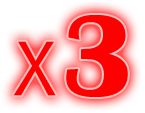
<style>
.page{position:relative;width:145px;height:113px;background:#ffffff}
.page>*{position:absolute;margin:0}
.t1{font:100px "HGGothicM";color:#fe0000}
.t2{font:120px "BritannicBold";color:#fe0000}
</style>
<div class="page">
<p class="t1" style="left:13px;top:15px;width:115px;height:82px">x<span class="t2">3</span></p>
</div>
